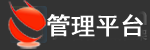
<style>
.page{position:relative;width:150px;height:50px;background:#333333}
.page>*{position:absolute;margin:0}
.t1{font:24px "SimHei";color:#ffffff;font-weight:bold}
</style>
<div class="page">
<p class="t1" style="left:47px;top:14px;width:96px;height:23px">管理平台</p>
</div>
